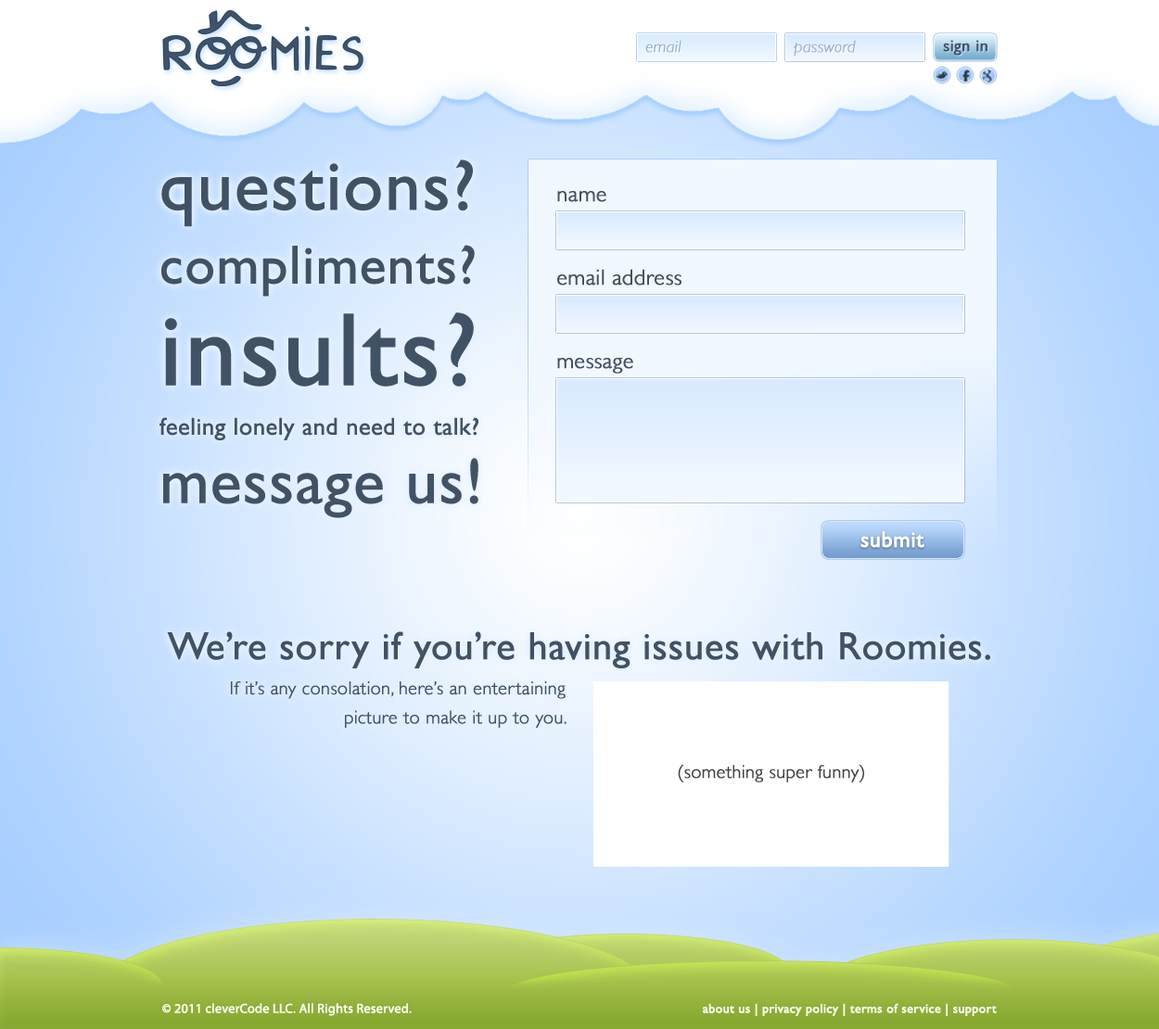
<style>
.page{position:relative;width:1159px;height:1029px}
.page>*{position:absolute;margin:0}
.t1{font:16.7px "GillSans-LightItalic";color:#96adca;font-weight:bold}
.t2{font:16.7px "GillSans";color:#425266;font-weight:bold}
.t3{font:24.1px/49.7px "GillSans";color:#425266;font-weight:bold}
.t4{font:71.4px/60.8px "GillSans";color:#425266;font-weight:bold}
.t5{font:54.7px/73.8px "GillSans";color:#425266;font-weight:bold}
.t6{font:103.8px/101.6px "GillSans";color:#425266;font-weight:bold}
.t7{font:64px/68.2px "GillSans";color:#425266;font-weight:bold}
.t8{font:22.2px "GillSans-Light";color:#425266;font-weight:bold}
.t9{font:22.2px "GillSans";color:#ffffff;font-weight:bold}
.t10{font:38.9px "GillSans";color:#425266;font-weight:bold}
.t11{font:18.5px/29.3px "GillSans-Light";color:#425266;font-weight:bold}
.t12{font:18.5px "GillSans-Light";color:#404040;font-weight:bold}
.t13{font:13px "MyriadPro-Regular";color:#f9ffe5;font-weight:bold}
.t14{font:13px "GillSans";color:#f9ffe5;font-weight:bold}
</style>
<div class="page">
<p class="t1" style="left:645px;top:40px;width:36px;height:13px">email</p>
<p class="t1" style="left:794px;top:40px;width:62px;height:17px">password</p>
<p class="t2" style="left:943px;top:40px;width:44px;height:16px">sign in</p>
<p class="t3" style="left:159px;top:159px;width:319px;height:359px"><span class="t4">questions?<br></span><span class="t5">compliments?<br></span><span class="t6">insults?<br></span>feeling lonely and need to talk?<br><span class="t7">message us!</span></p>
<p class="t8" style="left:557px;top:191px;width:49px;height:11px">name</p>
<p class="t8" style="left:557px;top:269px;width:124px;height:17px">email address</p>
<p class="t8" style="left:557px;top:358px;width:76px;height:16px">message</p>
<p class="t9" style="left:860px;top:531px;width:64px;height:17px">submit</p>
<p class="t10" style="left:167px;top:631px;width:823px;height:37px">We’re sorry if you’re having issues with Roomies.</p>
<p class="t11" style="left:231px;top:681px;width:335px;height:47px;text-align:right">If it’s any consolation, here’s an entertaining <br>picture to make it up to you.</p>
<p class="t12" style="left:678px;top:765px;width:186px;height:17px">(something super funny)</p>
<p class="t13" style="left:162px;top:1003px;width:250px;height:13px">© 2011 cleverCode LLC. All Rights Reserved.</p>
<p class="t14" style="left:703px;top:1003px;width:294px;height:13px">about us | privacy policy | terms of service | support</p>
</div>
